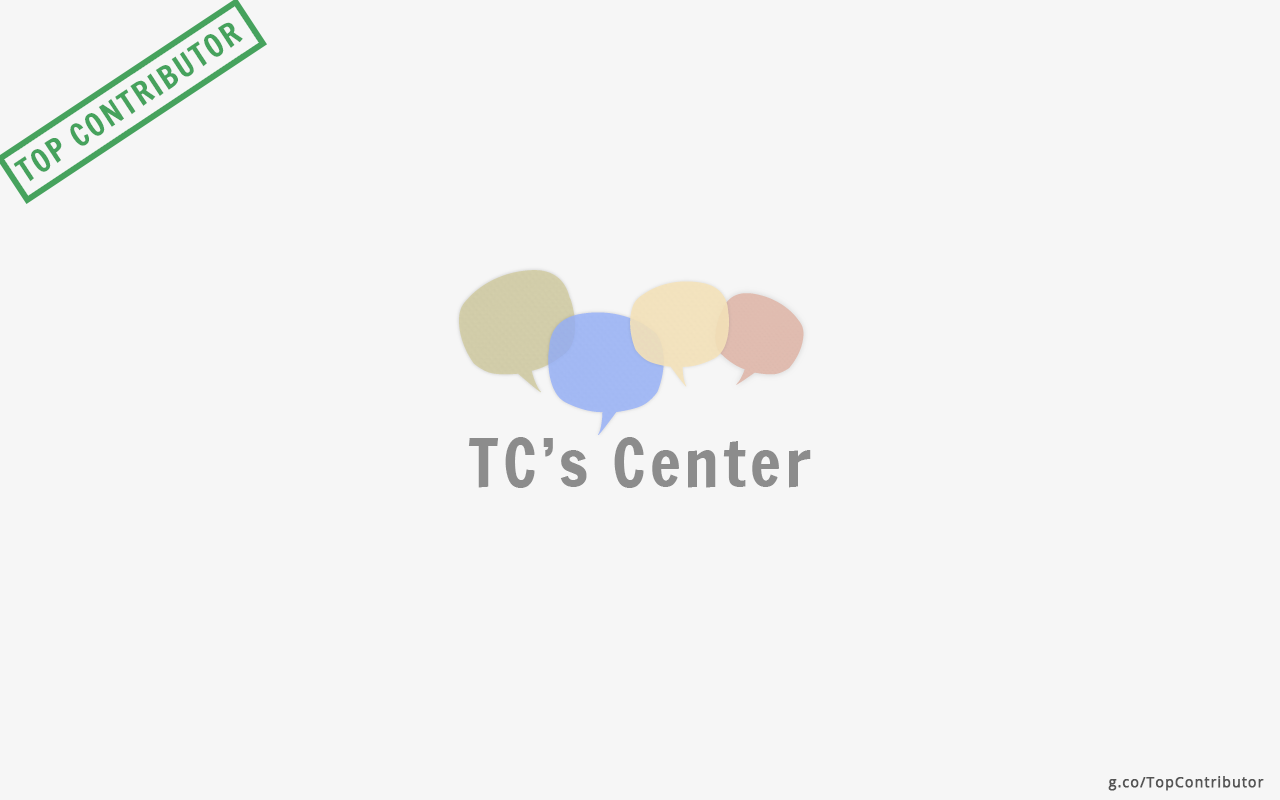
<style>
.page{position:relative;width:1280px;height:800px;background:#f6f6f6}
.page>*{position:absolute;margin:0}
.t1{font:31.4px "FrancoisOne-Regular";letter-spacing:0.06em;color:#46a25d;text-transform:uppercase}
.t2{font:64.5px "FrancoisOne-Regular";letter-spacing:0.06em;color:#8c8c8c}
.t3{font:14px "OpenSans-Regular";letter-spacing:0.06em;color:#545454;font-weight:bold}
</style>
<div class="page">
<p class="t1" style="left:13px;top:22px;width:230px;height:160px;rotate:-34deg">Top contributor</p>
<p class="t2" style="left:468px;top:437px;width:343px;height:51px">TC’s Center</p>
<p class="t3" style="left:1108px;top:776px;width:156px;height:15px">g.co/TopContributor</p>
</div>
